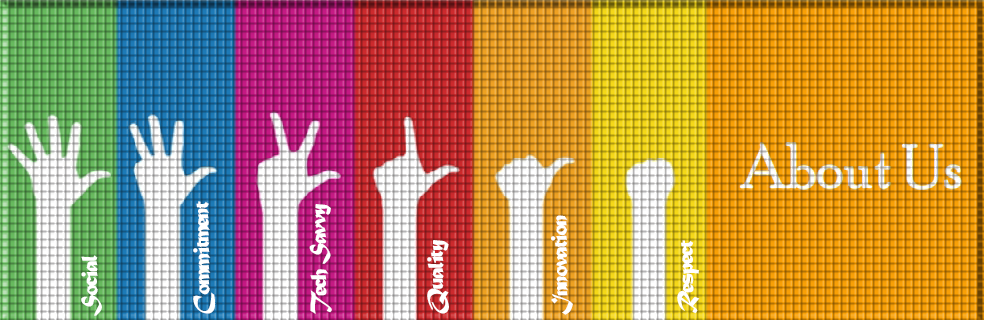
<style>
.page{position:relative;width:984px;height:320px}
.page>*{position:absolute;margin:0}
.t1{font:24px "MaturaMTScriptCapitals";letter-spacing:-0.075em;color:#ffffff}
</style>
<div class="page">
<p class="t1" style="left:193px;top:201px;width:23px;height:113px;rotate:-91deg">Commitment</p>
<p class="t1" style="left:309px;top:204px;width:23px;height:110px;rotate:-91deg">Tech Savvy</p>
<p class="t1" style="left:551px;top:215px;width:22px;height:100px;rotate:-91deg">Innovation</p>
<p class="t1" style="left:427px;top:240px;width:22px;height:74px;rotate:-91deg">Quality</p>
<p class="t1" style="left:677px;top:240px;width:23px;height:74px;rotate:-91deg">Respect</p>
<p class="t1" style="left:81px;top:255px;width:21px;height:61px;rotate:-91deg">Social</p>
</div>
